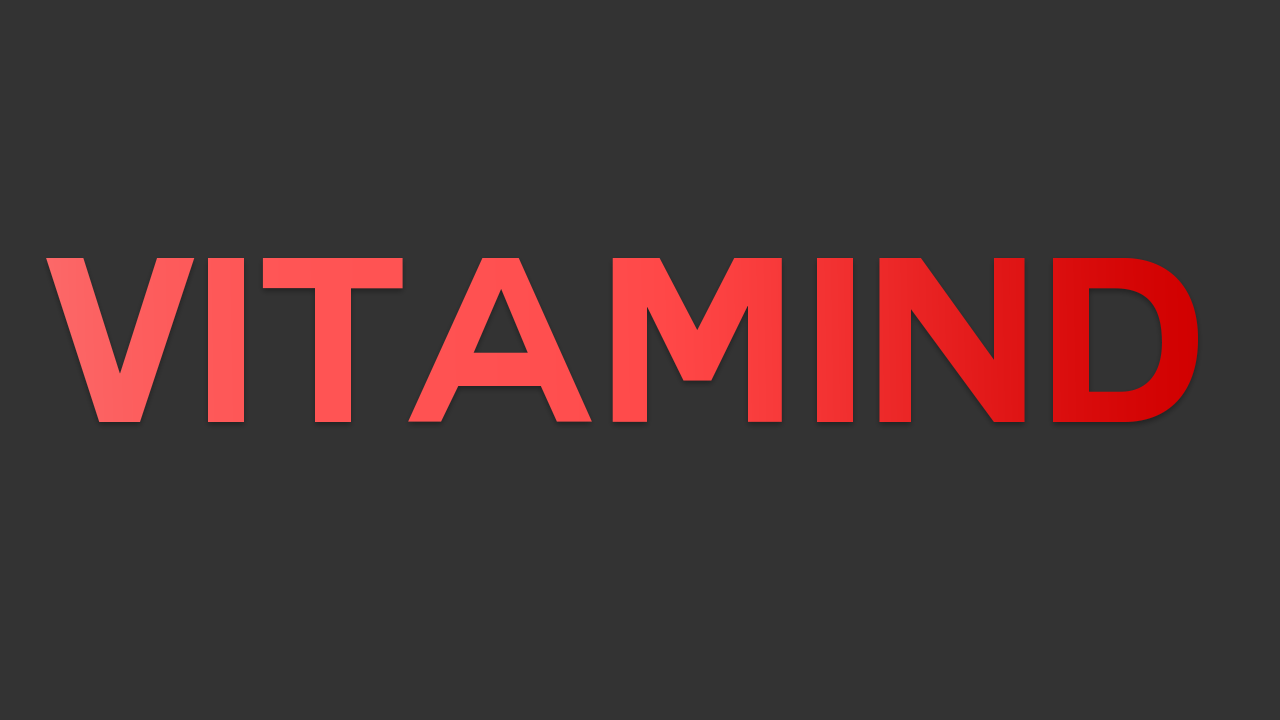
<style>
.page{position:relative;width:1280px;height:720px;background:#333333}
.page>*{position:absolute;margin:0}
.t1{font:229.2px "Couture-Bold"}
</style>
<div class="page">
<p class="t1" style="left:46px;top:258px;width:1152px;height:164px">VitaMind</p>
</div>
